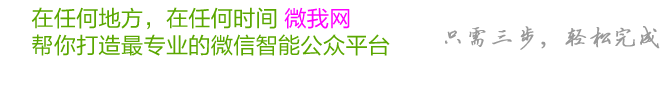
<style>
.page{position:relative;width:660px;height:89px;background:#ffffff}
.page>*{position:absolute;margin:0}
.t1{font:22.4px "FZLTHK--GBK1-0";color:#5aa700}
.t2{font:22.4px "FZLTHK--GBK1-0";color:#ff00ff}
</style>
<div class="page">
<p class="t1" style="left:31px;top:7px;width:359px;height:49px;text-align:justify">在任何地方，在任何时间 <span class="t2">微我网<br></span>帮你打造最专业的微信智能公众平台</p>
</div>
